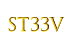
<style>
.page{position:relative;width:70px;height:50px;background:#ffffff}
.page>*{position:absolute;margin:0}
.t1{font:18px "TrajanColor-Concept"}
</style>
<div class="page">
<p class="t1" style="left:8px;top:17px;width:56px;height:15px">St33v</p>
</div>
